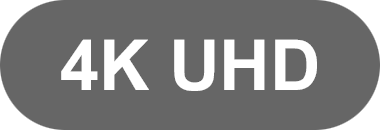
<style>
.page{position:relative;width:380px;height:130px;background:#666666}
.page>*{position:absolute;margin:0}
.t1{font:70px "Arial-BoldMT";color:#ffffff}
</style>
<div class="page">
<p class="t1" style="left:61px;top:39px;width:256px;height:52px">4K UHD</p>
</div>
